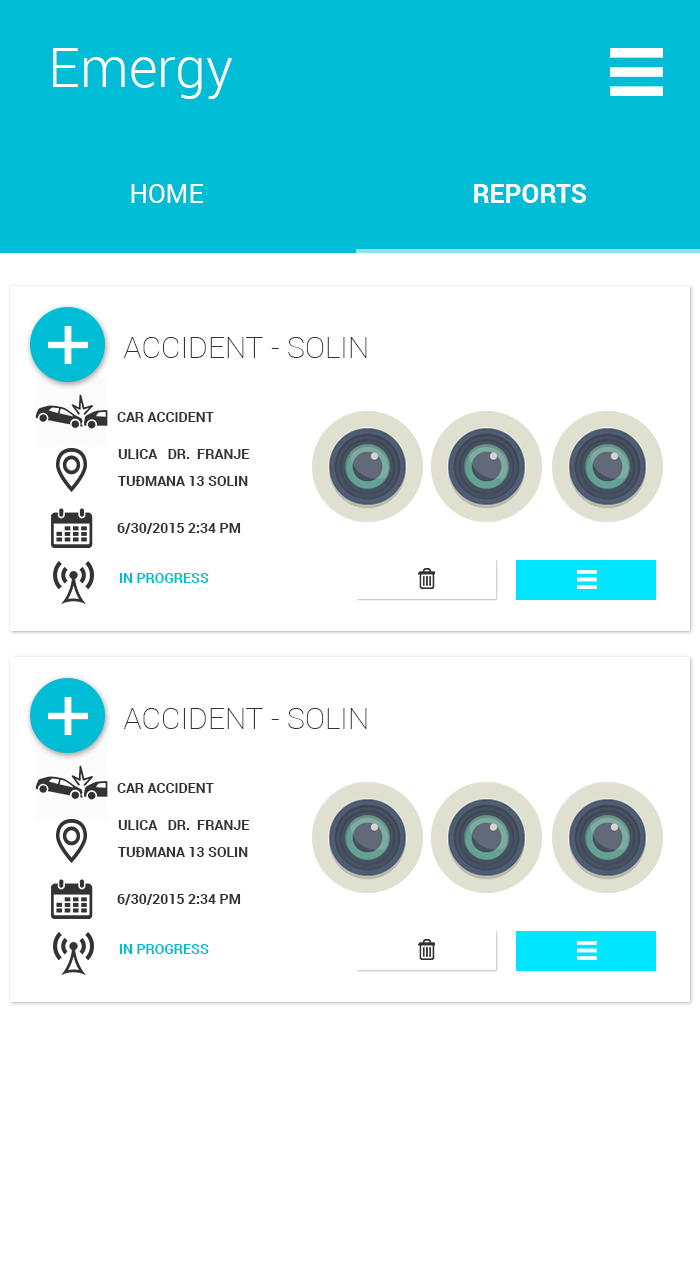
<style>
.page{position:relative;width:700px;height:1280px;background:#ffffff}
.page>*{position:absolute;margin:0}
.t1{font:55.2px "Roboto-Light";color:#fefefe}
.t2{font:26px "Roboto-Regular";color:#fefefe}
.t3{font:26px "Roboto-Bold";color:#fefefe}
.t4{font:30px "Roboto-Thin";color:#333333}
.t5{font:14px "Roboto-Bold";color:#333333;text-transform:uppercase}
.t6{font:14px/27px "Roboto-Bold";color:#333333;text-transform:uppercase}
.t7{font:14px "Roboto-Bold";color:#00bcd4;text-transform:uppercase}
</style>
<div class="page">
<p class="t1" style="left:53px;top:48px;width:179px;height:51px">Emergy</p>
<p class="t2" style="left:131px;top:184px;width:72px;height:19px">HOME</p>
<p class="t3" style="left:474px;top:184px;width:112px;height:19px">REPORTS</p>
<p class="t4" style="left:123px;top:337px;width:244px;height:21px">ACCIDENT - SOLIN</p>
<p class="t5" style="left:117px;top:412px;width:97px;height:10px">CAR ACCIDENT</p>
<p class="t6" style="left:118px;top:449px;width:132px;height:37px">ULICA   DR.  FRANJE TUĐMANA 13 SOLIN</p>
<p class="t5" style="left:117px;top:523px;width:124px;height:11px">6/30/2015 2:34 PM</p>
<p class="t7" style="left:119px;top:573px;width:90px;height:10px">IN PROGRESS</p>
<p class="t4" style="left:123px;top:708px;width:244px;height:21px">ACCIDENT - SOLIN</p>
<p class="t5" style="left:117px;top:783px;width:97px;height:10px">CAR ACCIDENT</p>
<p class="t6" style="left:118px;top:820px;width:132px;height:37px">ULICA   DR.  FRANJE TUĐMANA 13 SOLIN</p>
<p class="t5" style="left:117px;top:894px;width:124px;height:11px">6/30/2015 2:34 PM</p>
<p class="t7" style="left:119px;top:944px;width:90px;height:10px">IN PROGRESS</p>
</div>
